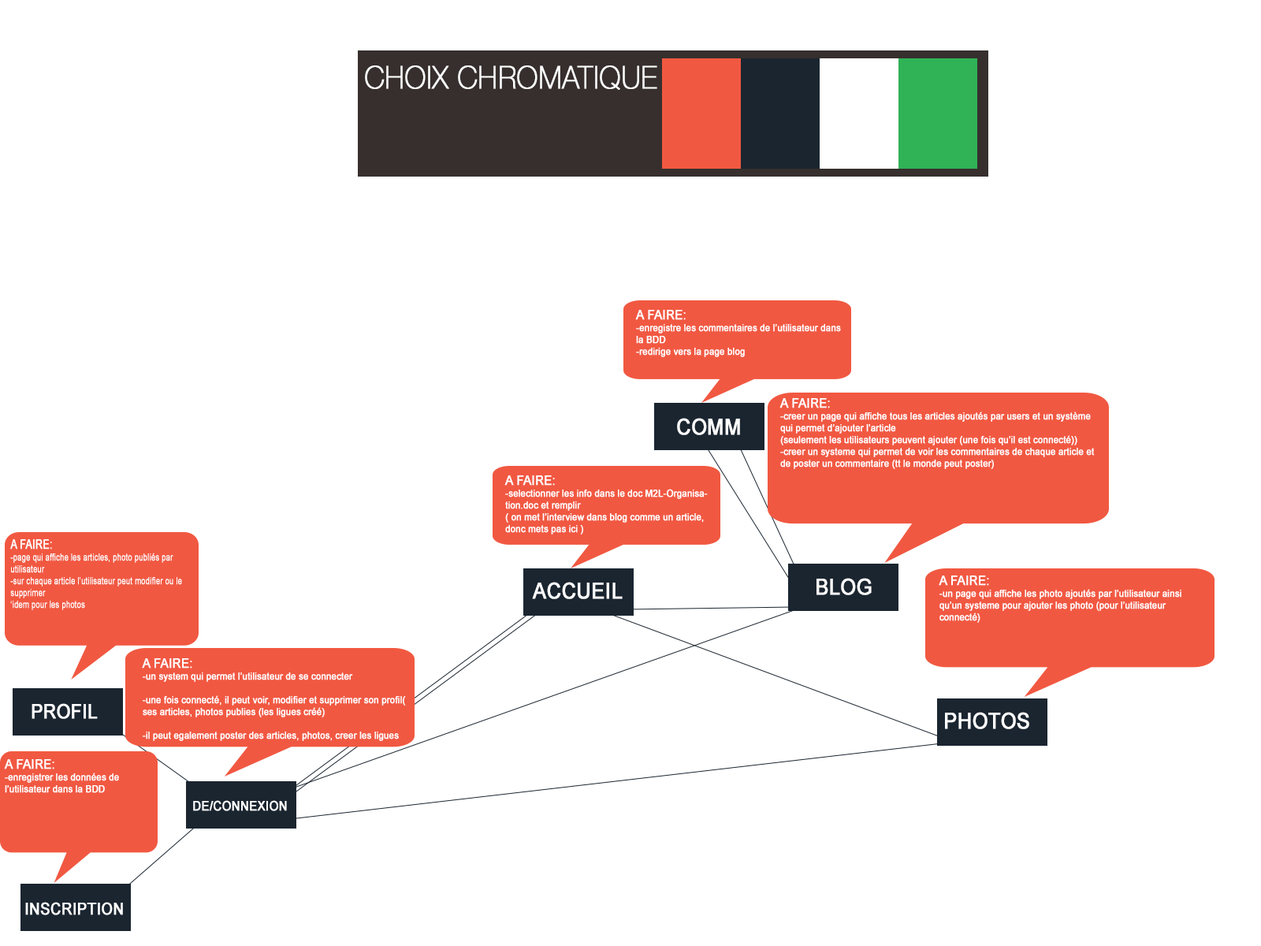
<style>
.page{position:relative;width:1261px;height:946px;background:#ffffff}
.page>*{position:absolute;margin:0}
.t1{font:31.5px "HelveticaNeue-Thin";color:#ffffff;text-transform:uppercase;font-weight:bold;scale:0.9 1}
.t2{font:9.9px "ArialMT";color:#ffffff;font-weight:bold;scale:0.9 1}
.t3{font:13.1px/37.8px "ArialMT";color:#ffffff;font-weight:bold;scale:0.9 1}
.t4{font:22.1px "ArialMT";color:#ffffff;text-transform:uppercase;font-weight:bold;scale:0.9 1}
.t5{font:9.9px "ArialMT";color:#ffffff;font-weight:bold;scale:0.75 1}
.t6{font:13.1px/37.8px "ArialMT";color:#ffffff;font-weight:bold;scale:0.75 1}
.t7{font:19.7px "ArialMT";color:#ffffff;text-transform:uppercase;font-weight:bold;scale:0.9 1}
.t8{font:13.1px "ArialMT";color:#ffffff;text-transform:uppercase;font-weight:bold;scale:0.9 1}
.t9{font:16.4px "ArialMT";color:#ffffff;text-transform:uppercase;font-weight:bold;scale:0.9 1}
</style>
<div class="page">
<p class="t1" style="left:365px;top:65px;width:292px;height:25px">Choix chromatique</p>
<p class="t2" style="left:635px;top:310px;width:206px;height:47px"><span class="t3">A FAIRE:<br></span>-enregistre les commentaires de l’utilisateur dans la BDD <br>-redirige vers la page blog</p>
<p class="t2" style="left:779px;top:398px;width:316px;height:71px"><span class="t3">A FAIRE:<br></span>-creer un page qui affiche tous les articles ajoutés par users et un système<br>qui permet d’ajouter l’article<br>(seulement les utilisateurs peuvent ajouter (une fois qu’il est connecté))<br>-creer un systeme qui permet de voir les commentaires de chaque article et de poster un commentaire (tt le monde peut poster)</p>
<p class="t4" style="left:677px;top:418px;width:63px;height:17px">Comm</p>
<p class="t2" style="left:504px;top:475px;width:204px;height:59px"><span class="t3">A FAIRE:<br></span>-selectionner les info dans le doc M2L-Organisation.doc et remplir<br>( on met l’interview dans blog comme un article, donc mets pas ici )</p>
<p class="t5" style="left:10px;top:539px;width:172px;height:71px"><span class="t6">A FAIRE: <br></span>-page qui affiche les articles, photo publiés par utilisateur<br>-sur chaque article l’utilisateur peut modifier ou le supprimer<br>‘idem pour les photos</p>
<p class="t4" style="left:532px;top:582px;width:91px;height:17px">Accueil</p>
<p class="t4" style="left:816px;top:578px;width:56px;height:17px">Blog</p>
<p class="t2" style="left:939px;top:575px;width:242px;height:48px"><span class="t3">A FAIRE:<br></span>-un page qui affiche les photo ajoutés par l’utilisateur ainsi qu’un systeme pour ajouter les photo (pour l’utilisateur connecté)</p>
<p class="t2" style="left:142px;top:658px;width:264px;height:83px"><span class="t3">A FAIRE: <br></span>-un system qui permet l’utilisateur de se connecter<br><br>-une fois connecté, il peut voir, modifier et supprimer son profil( ses articles, photos publies (les ligues créé)<br><br>-il peut egalement poster des articles, photos, creer les ligues</p>
<p class="t7" style="left:32px;top:703px;width:66px;height:16px">Profil</p>
<p class="t4" style="left:945px;top:712px;width:84px;height:17px">Photos</p>
<p class="t2" style="left:4px;top:759px;width:115px;height:34px"><span class="t3">A FAIRE:<br></span>-enregistrer les données de l’utilisateur dans la BDD</p>
<p class="t8" style="left:193px;top:800px;width:94px;height:11px">De/connexion</p>
<p class="t9" style="left:25px;top:902px;width:98px;height:13px">Inscription</p>
</div>
